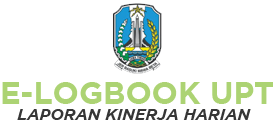
<style>
.page{position:relative;width:275px;height:121px;background:#ffffff}
.page>*{position:absolute;margin:0}
.t1{font:30.9px "Gotham-Bold";color:#acd373}
.t2{font:16.1px "Gotham-BoldItalic";color:#363636}
</style>
<div class="page">
<p class="t1" style="left:2px;top:82px;width:271px;height:22px">E-LOGBOOK UPT</p>
<p class="t2" style="left:17px;top:109px;width:234px;height:11px">LAPORAN KINERJA HARIAN</p>
</div>
